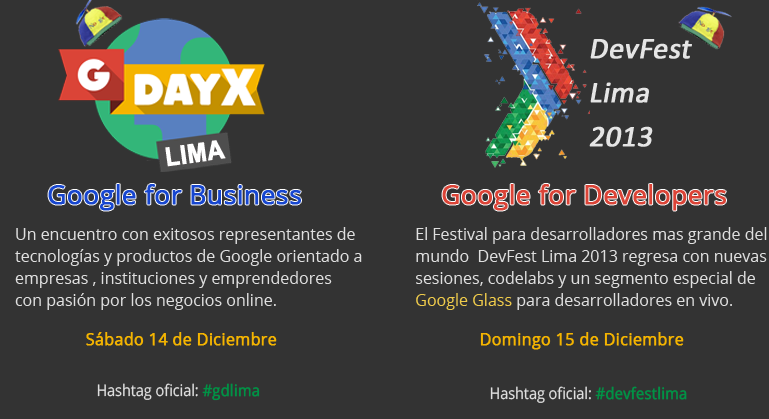
<style>
.page{position:relative;width:769px;height:419px;background:#333333}
.page>*{position:absolute;margin:0}
.t1{font:30px/44.2px "Calibri";color:#e5e5e5;font-weight:bold;font-style:italic}
.t2{font:26px "OpenSans";color:#1746cf;font-weight:bold}
.t3{font:26px "OpenSans";color:#db4437;font-weight:bold}
.t4{font:16px/22px "OpenSans";color:#dfdfdf}
.t5{font:16px/22px "OpenSans";color:#efcb4b}
.t6{font:16px "OpenSans";color:#f4b400;font-weight:bold}
.t7{font:16px "OpenSans";color:#dfdfdf;scale:0.9 1}
.t8{font:16px "OpenSans";color:#009245;font-weight:bold;scale:0.9 1}
</style>
<div class="page">
<p class="t1" style="left:589px;top:39px;width:103px;height:108px">DevFest<br>Lima<br>2013</p>
<p class="t2" style="left:48px;top:184px;width:253px;height:27px">Google for Business</p>
<p class="t3" style="left:442px;top:184px;width:284px;height:27px">Google for Developers</p>
<p class="t4" style="left:15px;top:227px;width:347px;height:83px">Un encuentro con exitosos representantes de tecnologías y productos de Google orientado a  empresas , instituciones y emprendedores con pasión por los negocios online.</p>
<p class="t4" style="left:416px;top:227px;width:351px;height:83px">El Festival para desarrolladores mas grande del mundo  DevFest Lima 2013 regresa con nuevas sesiones, codelabs y un segmento especial de <span class="t5">Google Glass</span> para desarrolladores en vivo.</p>
<p class="t6" style="left:86px;top:332px;width:191px;height:14px">Sábado 14 de Diciembre</p>
<p class="t6" style="left:480px;top:332px;width:204px;height:18px">Domingo 15 de Diciembre</p>
<p class="t7" style="left:97px;top:383px;width:163px;height:18px">Hashtag oficial: <span class="t8">#gdlima</span></p>
<p class="t7" style="left:490px;top:386px;width:197px;height:17px">Hashtag oficial: <span class="t8">#devfestlima</span></p>
</div>
